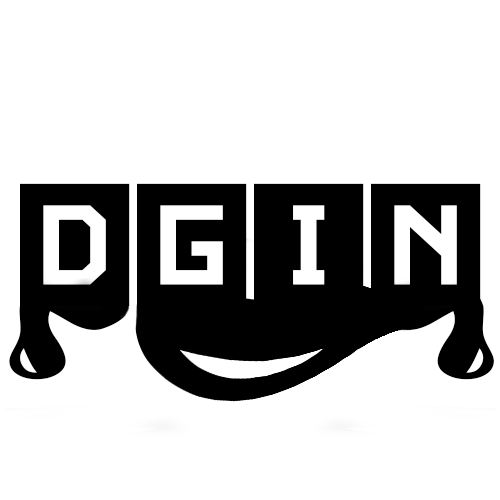
<style>
.page{position:relative;width:500px;height:500px;background:#ffffff}
.page>*{position:absolute;margin:0}
.t1{font:229.9px "JD-Eugenia";color:#000000;scale:1.09 1}
</style>
<div class="page">
<p class="t1" style="left:20px;top:183px;width:461px;height:123px">DGIN</p>
</div>
